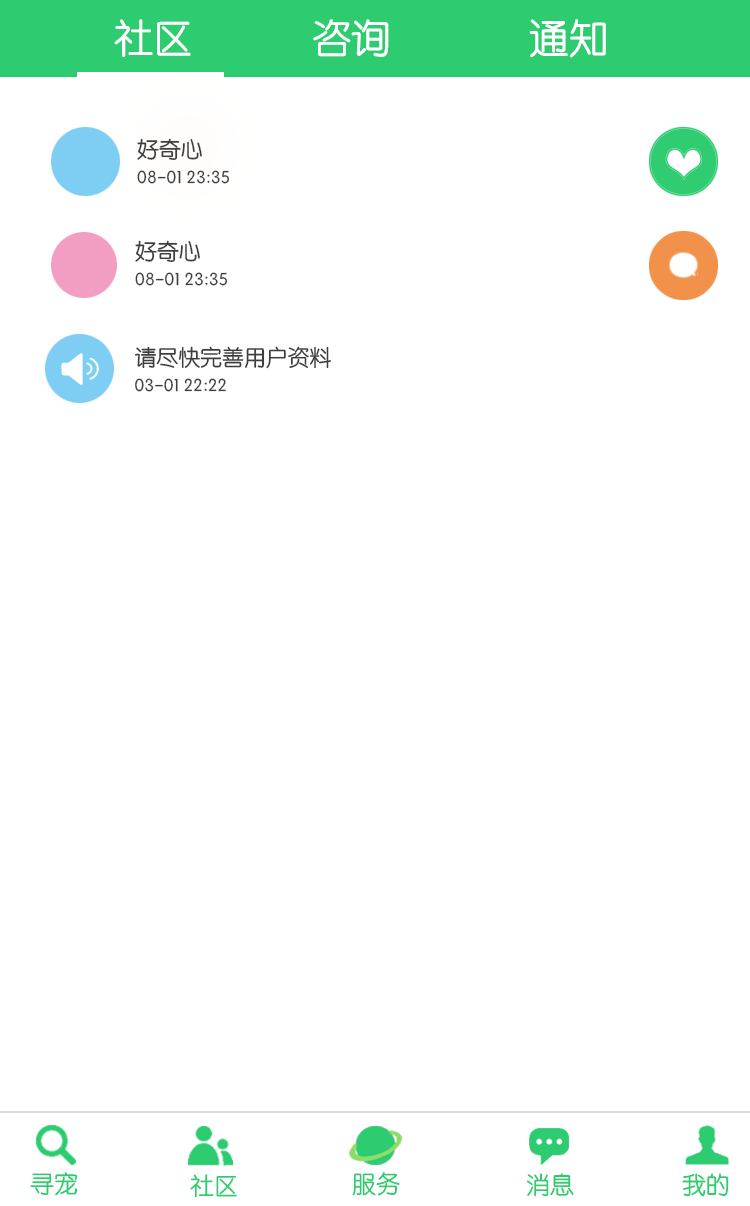
<style>
.page{position:relative;width:750px;height:1206px;background:#ffffff}
.page>*{position:absolute;margin:0}
.t1{font:39.6px "STYuanti-SC-Regular";color:#ffffff}
.t2{font:17.7px/30.2px "STYuanti-SC-Regular";color:#3e3e3e}
.t3{font:21.9px/30.2px "STYuanti-SC-Regular";color:#3e3e3e}
.t4{font:24px "STYuanti-SC-Regular";color:#2ecc71}
.t5{font:24px "STYuanti-SC-Regular"}
</style>
<div class="page">
<p class="t1" style="left:114px;top:19px;width:492px;height:39px">社区            咨询              通知</p>
<p class="t2" style="left:137px;top:138px;width:93px;height:46px"><span class="t3">好奇心<br></span>08-01 23:35</p>
<p class="t2" style="left:135px;top:240px;width:93px;height:46px"><span class="t3">好奇心<br></span>08-01 23:35</p>
<p class="t2" style="left:135px;top:346px;width:196px;height:46px"><span class="t3">请尽快完善用户资料<br></span>03-01 22:22</p>
<p class="t4" style="left:30px;top:1172px;width:48px;height:24px">寻宠</p>
<p class="t4" style="left:190px;top:1174px;width:47px;height:24px">社区</p>
<p class="t5" style="left:352px;top:1173px;width:48px;height:24px">服务</p>
<p class="t4" style="left:352px;top:1172px;width:48px;height:24px">服务</p>
<p class="t5" style="left:526px;top:1173px;width:47px;height:24px">消息</p>
<p class="t4" style="left:527px;top:1173px;width:47px;height:24px">消息</p>
<p class="t4" style="left:682px;top:1173px;width:47px;height:24px">我的</p>
<p class="t4" style="left:682px;top:1173px;width:47px;height:24px">我的</p>
</div>
